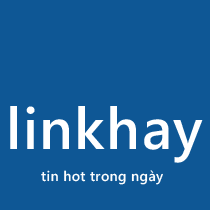
<style>
.page{position:relative;width:210px;height:210px;background:#0e5795}
.page>*{position:absolute;margin:0}
.t1{font:58px "SegoeWP-Semibold";letter-spacing:0.025em;color:#ffffff}
.t2{font:14px "SegoeWP-Semibold";letter-spacing:0.025em;color:#fefefe}
</style>
<div class="page">
<p class="t1" style="left:10px;top:106px;width:193px;height:57px">linkhay</p>
<p class="t2" style="left:41px;top:170px;width:122px;height:15px">tin hot trong ngày</p>
</div>
